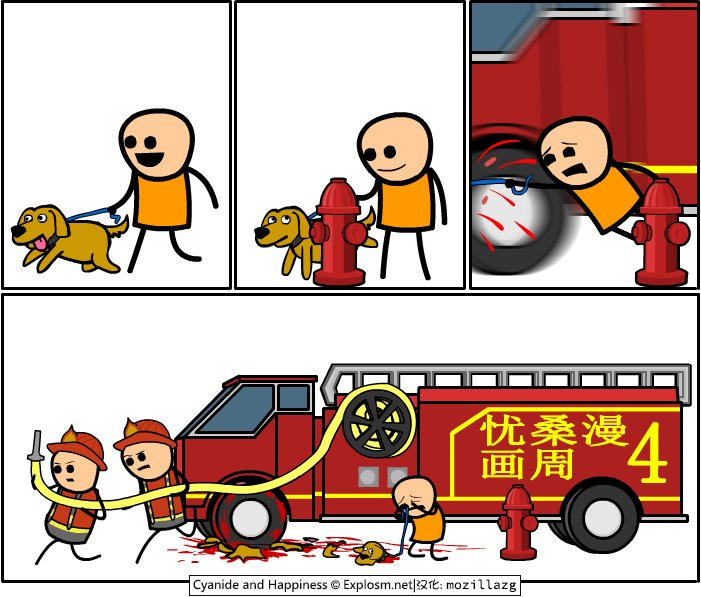
<style>
.page{position:relative;width:701px;height:597px;background:#ffffff}
.page>*{position:absolute;margin:0}
.t1{font:34.2px/34.2px "SimSun";color:#ffff00;font-weight:bold;scale:1.45 1}
.t2{font:86px "SimSun";color:#ffff00;font-weight:bold}
</style>
<div class="page">
<p class="t1" style="left:479px;top:414px;width:150px;height:67px">忧桑漫<br>画周</p>
<p class="t2" style="left:627px;top:422px;width:41px;height:61px">4</p>
</div>
